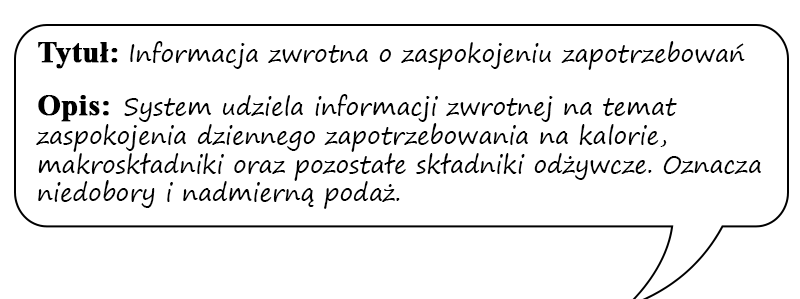
<style>
.page{position:relative;width:800px;height:299px;background:#ffffff}
.page>*{position:absolute;margin:0}
.t1{font:24px "SegoePrint";color:#000000}
.t2{font:30px "TimesNewRomanPS-BoldMT";color:#000000;font-weight:bold}
</style>
<div class="page">
<p class="t1" style="left:36px;top:41px;width:725px;height:168px"><span class="t2">Tytuł: </span>Informacja zwrotna o zaspokojeniu zapotrzebowań<br><br><span class="t2">Opis:  </span>System udziela informacji zwrotnej na temat zaspokojenia dziennego zapotrzebowania na kalorie, makroskładniki oraz pozostałe składniki odżywcze. Oznacza niedobory i nadmierną podaż.</p>
</div>
